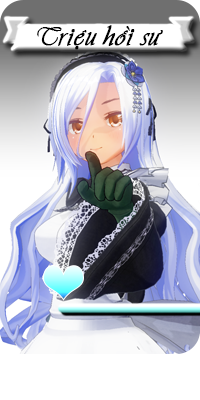
<style>
.page{position:relative;width:200px;height:400px}
.page>*{position:absolute;margin:0}
.t1{font:24px "ViviennePlain";color:#000000;font-weight:bold}
</style>
<div class="page">
<p class="t1" style="left:37px;top:25px;width:126px;height:25px">Trieäu hoài sö</p>
</div>
